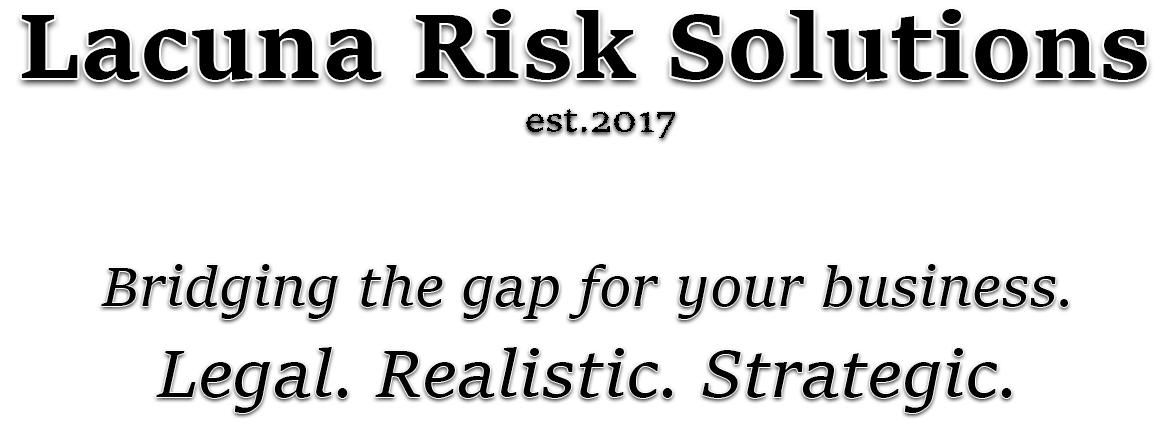
<style>
.page{position:relative;width:1168px;height:435px;background:#ffffff}
.page>*{position:absolute;margin:0}
.t1{font:96px "SitkaSmall-Bold";color:#000000}
.t2{font:36px "SitkaSmall";color:#000000}
.t3{font:60px "SitkaText-Italic";color:#000000}
.t4{font:72px "SitkaText-Italic";color:#000000}
</style>
<div class="page">
<p class="t1" style="left:21px;top:9px;width:1126px;height:71px">Lacuna Risk Solutions</p>
<p class="t2" style="left:526px;top:109px;width:150px;height:29px">est.2017</p>
<p class="t3" style="left:101px;top:264px;width:968px;height:55px">Bridging the gap for your business.</p>
<p class="t4" style="left:156px;top:347px;width:856px;height:66px">Legal. Realistic. Strategic.</p>
</div>
